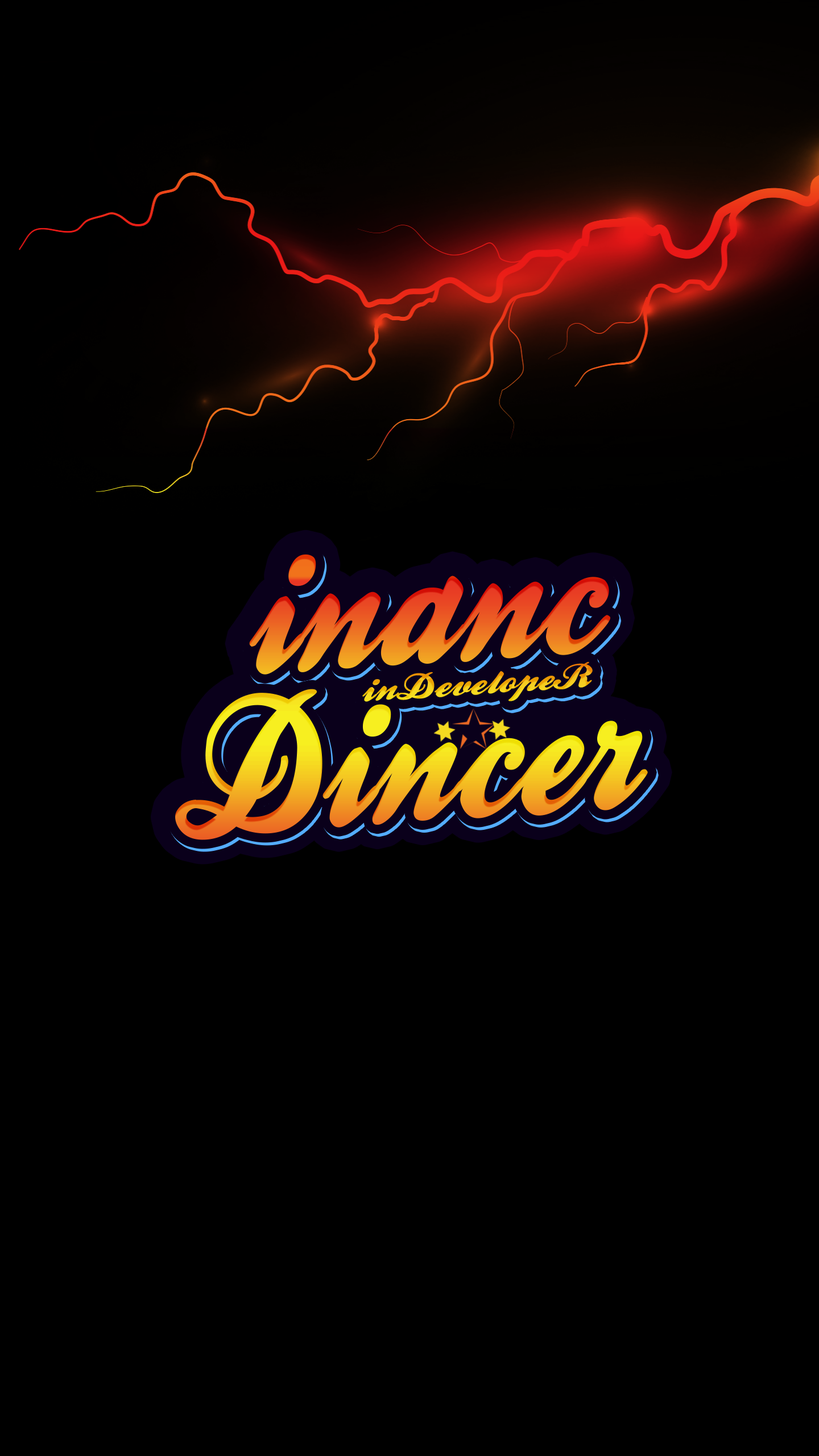
<style>
.page{position:relative;width:819px;height:1456px;background:#000000}
.page>*{position:absolute;margin:0}
.t1{font:181.6px "BallparkWeiner";scale:0.91 1}
.t2{font:33.7px "BallparkWeiner";scale:1.3 1}
.t3{font:26.9px "BallparkWeiner";scale:1.3 1}
.t4{font:186.3px "BallparkWeiner";scale:0.91 1}
</style>
<div class="page">
<p class="t1" style="left:249px;top:554px;width:362px;height:121px;rotate:-4deg">inanc</p>
<p class="t1" style="left:249px;top:554px;width:362px;height:121px;rotate:-4deg">inanc</p>
<p class="t1" style="left:251px;top:557px;width:362px;height:120px;rotate:-4deg">inanc</p>
<p class="t2" style="left:362px;top:661px;width:231px;height:41px;rotate:-4deg"><span class="t3"><br></span>inDevelopeR</p>
<p class="t2" style="left:362px;top:661px;width:231px;height:41px;rotate:-4deg"><span class="t3"><br></span>inDevelopeR</p>
<p class="t4" style="left:175px;top:689px;width:473px;height:151px;rotate:-4deg">Dincer</p>
<p class="t4" style="left:175px;top:689px;width:473px;height:151px;rotate:-4deg">Dincer</p>
<p class="t4" style="left:177px;top:692px;width:473px;height:151px;rotate:-4deg">Dincer</p>
</div>
